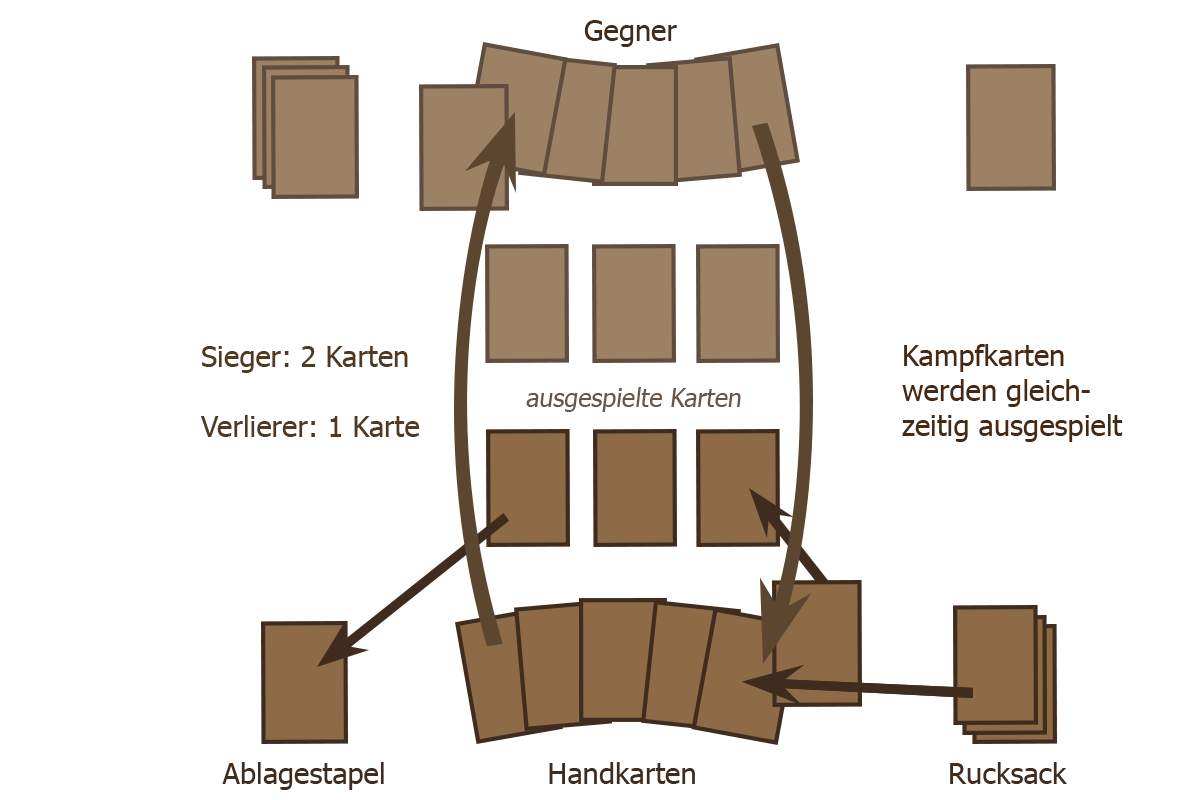
<style>
.page{position:relative;width:1200px;height:800px;background:#ffffff}
.page>*{position:absolute;margin:0}
.t1{font:29.2px "Tahoma";color:#3f2c1e}
.t2{font:29.2px "Tahoma";color:#4f3922}
.t3{font:29.2px "Tahoma";color:#452915}
.t4{font:26px "Tahoma";color:#665548;scale:0.96 1}
</style>
<div class="page">
<p class="t1" style="left:584px;top:20px;width:93px;height:27px">Gegner</p>
<p class="t2" style="left:201px;top:346px;width:218px;height:91px">Sieger: 2 Karten<br><br>Verlierer: 1 Karte</p>
<p class="t3" style="left:902px;top:344px;width:221px;height:98px">Kampfkarten <br>werden gleich-<br>zeitig ausgespielt</p>
<p class="t4" style="left:526px;top:387px;width:215px;height:25px">ausgespielte Karten</p>
<p class="t1" style="left:222px;top:762px;width:162px;height:28px">Ablagestapel</p>
<p class="t1" style="left:549px;top:762px;width:146px;height:22px">Handkarten</p>
<p class="t1" style="left:950px;top:762px;width:117px;height:22px">Rucksack</p>
</div>
